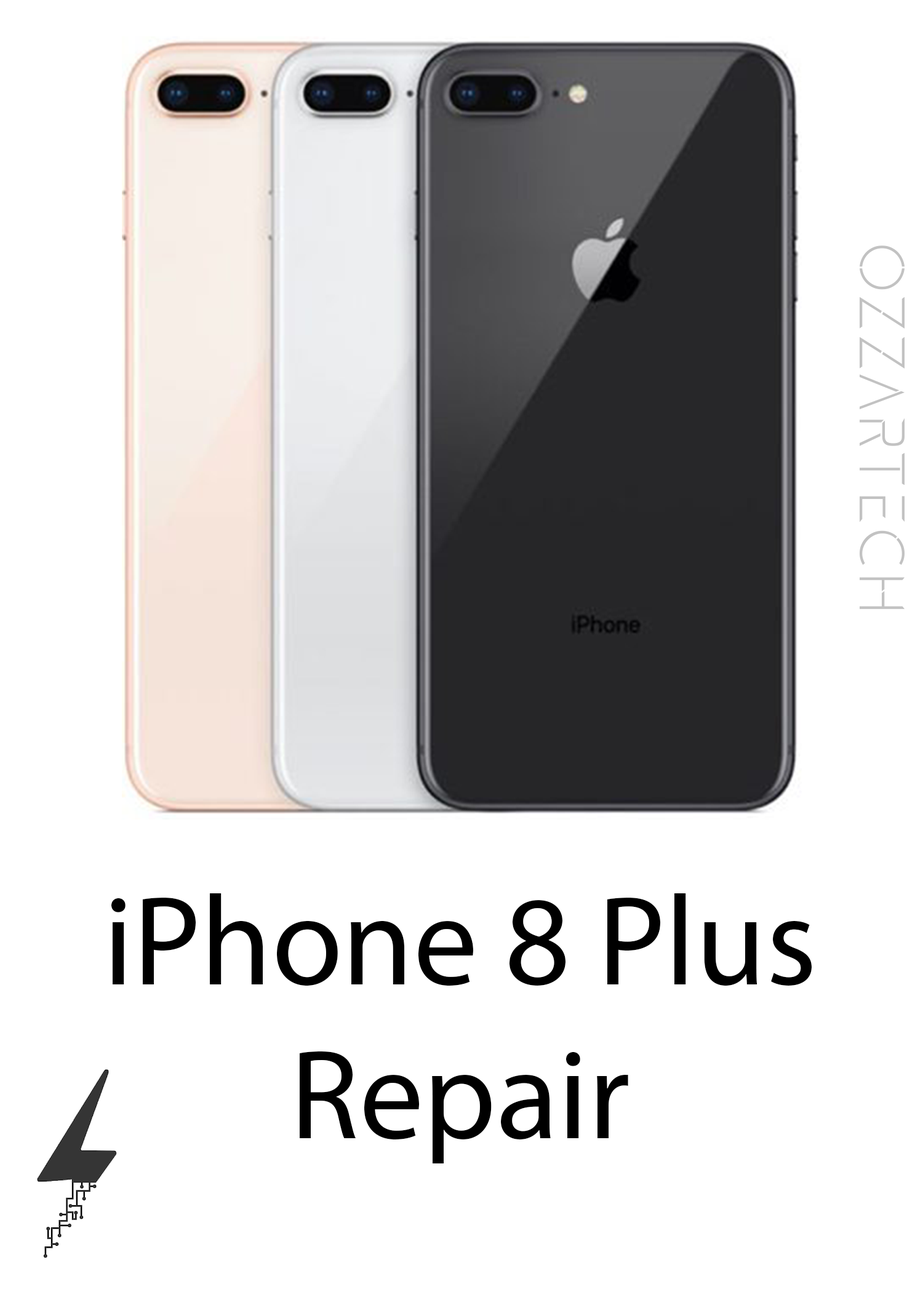
<style>
.page{position:relative;width:923px;height:1292px;background:#ffffff}
.page>*{position:absolute;margin:0}
.t1{font:64.1px "Gluon-Light";color:#c2c2c2}
.t2{font:128.2px "MyriadPro-Regular";color:#000000}
</style>
<div class="page">
<p class="t1" style="left:860px;top:245px;width:44px;height:364px;rotate:90deg">OzzarTech</p>
<p class="t2" style="left:111px;top:893px;width:701px;height:270px;text-align:center">iPhone 8 Plus<br>Repair</p>
</div>
